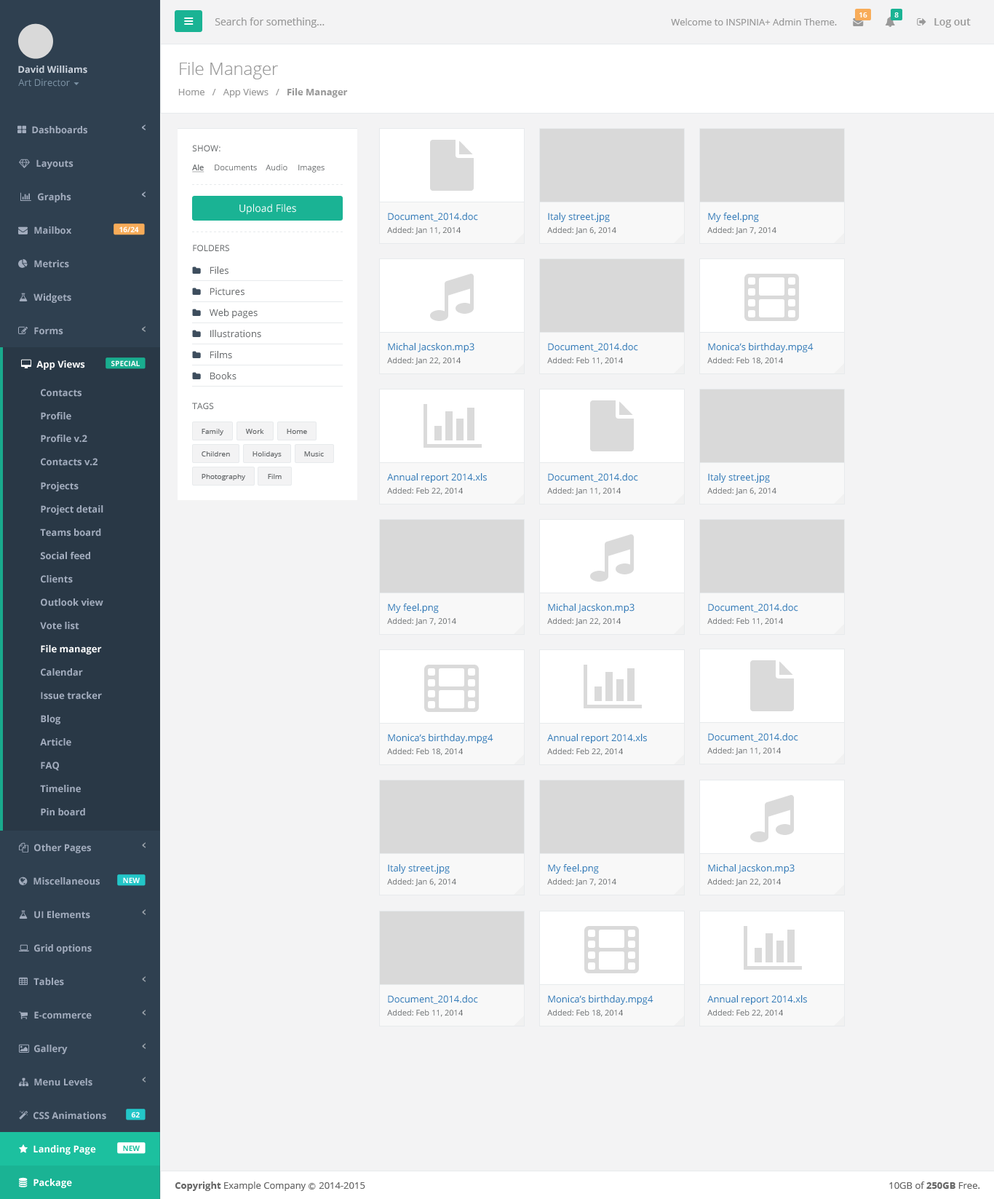
<style>
.page{position:relative;width:994px;height:1199px;background:#f3f3f4}
.page>*{position:absolute;margin:0}
.t1{font:10.2px "OpenSans";color:#999999}
.t2{font:7.3px "OpenSans-Semibold";color:#ffffff}
.t3{font:9.5px "OpenSans";color:#999999}
.t4{font:10.2px "OpenSans-Semibold";color:#999999}
.t5{font:9.5px "OpenSans-Bold";color:#cad1db}
.t6{font:17.5px "OpenSans-Light";color:#999999}
.t7{font:9.5px "OpenSans";color:#7d93a5}
.t8{font:9.5px "OpenSans-Bold";color:#999999}
.t9{font:9.5px "OpenSans-Bold";color:#a2acbd}
.t10{font:8.7px "OpenSans";color:#676a6c}
.t11{font:8px "OpenSans";color:#676a6c;text-decoration:underline}
.t12{font:8px "OpenSans";color:#676a6c}
.t13{font:10.2px "OpenSans";color:#ffffff}
.t14{font:9.5px "OpenSans";color:#337ab7}
.t15{font:7.3px "OpenSans-Bold";color:#fefefe}
.t16{font:9.5px "OpenSans";color:#676a6c}
.t17{font:9.5px "OpenSans-Bold";color:#ffffff}
.t18{font:7.3px "OpenSans";color:#676a6c}
.t19{font:7.3px "OpenSans-Bold";color:#1cc09f}
.t20{font:9.5px "OpenSans";color:#666666}
.t21{font:9.5px "OpenSans-Bold";color:#666666}
.t22{font:7.3px "Meiryo";color:#666666}
</style>
<div class="page">
<p class="t1" style="left:215px;top:17px;width:110px;height:11px">Search for something...</p>
<p class="t2" style="left:860px;top:12px;width:8px;height:5px">16</p>
<p class="t2" style="left:895px;top:12px;width:4px;height:5px">8</p>
<p class="t3" style="left:671px;top:18px;width:166px;height:7px">Welcome to INSPINIA+ Admin Theme.</p>
<p class="t4" style="left:935px;top:18px;width:36px;height:10px">Log out</p>
<p class="t5" style="left:18px;top:66px;width:69px;height:8px">David Williams</p>
<p class="t6" style="left:180px;top:62px;width:98px;height:17px">File Manager</p>
<p class="t7" style="left:18px;top:79px;width:52px;height:8px">Art Director</p>
<p class="t3" style="left:178px;top:88px;width:170px;height:10px">Home   /   App Views   /  <span class="t8"> File Manager</span></p>
<p class="t9" style="left:32px;top:126px;width:55px;height:8px">Dashboards</p>
<p class="t10" style="left:192px;top:145px;width:29px;height:6px">SHOW:</p>
<p class="t9" style="left:36px;top:159px;width:38px;height:10px">Layouts</p>
<p class="t11" style="left:192px;top:165px;width:13px;height:8px">Ale</p>
<p class="t12" style="left:215px;top:165px;width:42px;height:5px">Documents</p>
<p class="t12" style="left:266px;top:164px;width:22px;height:6px">Audio</p>
<p class="t12" style="left:298px;top:165px;width:27px;height:8px">Images</p>
<p class="t9" style="left:38px;top:193px;width:33px;height:9px">Graphs</p>
<p class="t13" style="left:240px;top:204px;width:56px;height:11px">Upload Files</p>
<p class="t14" style="left:388px;top:213px;width:90px;height:8px">Document_2014.doc</p>
<p class="t14" style="left:548px;top:213px;width:62px;height:9px">Italy street.jpg</p>
<p class="t14" style="left:708px;top:213px;width:51px;height:9px">My feel.png</p>
<p class="t9" style="left:34px;top:226px;width:37px;height:8px">Mailbox</p>
<p class="t15" style="left:119px;top:226px;width:20px;height:6px">16/24</p>
<p class="t12" style="left:387px;top:226px;width:74px;height:8px">Added: Jan 11, 2014</p>
<p class="t12" style="left:547px;top:226px;width:70px;height:8px">Added: Jan 6, 2014</p>
<p class="t12" style="left:708px;top:226px;width:69px;height:8px">Added: Jan 7, 2014</p>
<p class="t10" style="left:193px;top:245px;width:36px;height:6px">FOLDERS</p>
<p class="t9" style="left:34px;top:260px;width:35px;height:8px">Metrics</p>
<p class="t16" style="left:210px;top:266px;width:19px;height:8px">Files</p>
<p class="t9" style="left:33px;top:293px;width:38px;height:10px">Widgets</p>
<p class="t16" style="left:210px;top:288px;width:35px;height:8px">Pictures</p>
<p class="t16" style="left:210px;top:309px;width:48px;height:9px">Web pages</p>
<p class="t9" style="left:34px;top:327px;width:29px;height:8px">Forms</p>
<p class="t16" style="left:210px;top:330px;width:51px;height:8px">Illustrations</p>
<p class="t16" style="left:210px;top:351px;width:22px;height:8px">Films</p>
<p class="t14" style="left:388px;top:343px;width:87px;height:9px">Michal Jacskon.mp3</p>
<p class="t14" style="left:548px;top:343px;width:90px;height:9px">Document_2014.doc</p>
<p class="t14" style="left:708px;top:343px;width:106px;height:9px">Monica’s birthday.mpg4</p>
<p class="t17" style="left:36px;top:360px;width:49px;height:10px">App Views</p>
<p class="t15" style="left:111px;top:360px;width:29px;height:6px">SPECIAL</p>
<p class="t12" style="left:387px;top:357px;width:74px;height:8px">Added: Jan 22, 2014</p>
<p class="t12" style="left:547px;top:357px;width:76px;height:8px">Added: Feb 11, 2014</p>
<p class="t12" style="left:708px;top:357px;width:75px;height:8px">Added: Feb 18, 2014</p>
<p class="t16" style="left:210px;top:372px;width:27px;height:8px">Books</p>
<p class="t9" style="left:41px;top:389px;width:41px;height:8px">Contacts</p>
<p class="t9" style="left:41px;top:412px;width:30px;height:8px">Profile</p>
<p class="t10" style="left:192px;top:403px;width:22px;height:6px">TAGS</p>
<p class="t9" style="left:41px;top:435px;width:46px;height:8px">Profile v.2</p>
<p class="t18" style="left:202px;top:429px;width:22px;height:6px">Family</p>
<p class="t18" style="left:245px;top:429px;width:19px;height:5px">Work</p>
<p class="t18" style="left:287px;top:429px;width:20px;height:5px">Home</p>
<p class="t9" style="left:41px;top:458px;width:57px;height:8px">Contacts v.2</p>
<p class="t18" style="left:202px;top:451px;width:28px;height:5px">Children</p>
<p class="t18" style="left:253px;top:451px;width:29px;height:7px">Holidays</p>
<p class="t18" style="left:304px;top:451px;width:20px;height:5px">Music</p>
<p class="t18" style="left:202px;top:474px;width:43px;height:6px">Photography</p>
<p class="t18" style="left:268px;top:474px;width:14px;height:5px">Film</p>
<p class="t14" style="left:387px;top:473px;width:100px;height:10px">Annual report 2014.xls</p>
<p class="t14" style="left:548px;top:473px;width:90px;height:9px">Document_2014.doc</p>
<p class="t14" style="left:708px;top:473px;width:62px;height:10px">Italy street.jpg</p>
<p class="t9" style="left:41px;top:482px;width:38px;height:9px">Projects</p>
<p class="t12" style="left:387px;top:487px;width:76px;height:8px">Added: Feb 22, 2014</p>
<p class="t12" style="left:547px;top:487px;width:74px;height:8px">Added: Jan 11, 2014</p>
<p class="t12" style="left:708px;top:487px;width:69px;height:8px">Added: Jan 6, 2014</p>
<p class="t9" style="left:41px;top:505px;width:62px;height:10px">Project detail</p>
<p class="t9" style="left:40px;top:529px;width:61px;height:8px">Teams board</p>
<p class="t9" style="left:40px;top:552px;width:50px;height:8px">Social feed</p>
<p class="t9" style="left:41px;top:575px;width:32px;height:8px">Clients</p>
<p class="t9" style="left:41px;top:598px;width:62px;height:8px">Outlook view</p>
<p class="t14" style="left:388px;top:604px;width:51px;height:9px">My feel.png</p>
<p class="t14" style="left:548px;top:604px;width:87px;height:9px">Michal Jacskon.mp3</p>
<p class="t14" style="left:708px;top:604px;width:91px;height:8px">Document_2014.doc</p>
<p class="t12" style="left:387px;top:617px;width:69px;height:8px">Added: Jan 7, 2014</p>
<p class="t12" style="left:547px;top:617px;width:74px;height:8px">Added: Jan 22, 2014</p>
<p class="t12" style="left:708px;top:617px;width:75px;height:8px">Added: Feb 11, 2014</p>
<p class="t9" style="left:40px;top:622px;width:39px;height:8px">Vote list</p>
<p class="t17" style="left:41px;top:645px;width:61px;height:9px">File manager</p>
<p class="t9" style="left:41px;top:668px;width:42px;height:8px">Calendar</p>
<p class="t9" style="left:41px;top:692px;width:61px;height:8px">Issue tracker</p>
<p class="t9" style="left:41px;top:715px;width:19px;height:9px">Blog</p>
<p class="t14" style="left:388px;top:734px;width:106px;height:9px">Monica’s birthday.mpg4</p>
<p class="t14" style="left:547px;top:734px;width:100px;height:9px">Annual report 2014.xls</p>
<p class="t14" style="left:708px;top:733px;width:91px;height:9px">Document_2014.doc</p>
<p class="t9" style="left:40px;top:738px;width:31px;height:8px">Article</p>
<p class="t12" style="left:387px;top:748px;width:76px;height:8px">Added: Feb 18, 2014</p>
<p class="t12" style="left:547px;top:748px;width:76px;height:8px">Added: Feb 22, 2014</p>
<p class="t12" style="left:708px;top:747px;width:73px;height:8px">Added: Jan 11, 2014</p>
<p class="t9" style="left:41px;top:762px;width:18px;height:9px">FAQ</p>
<p class="t9" style="left:40px;top:785px;width:41px;height:8px">Timeline</p>
<p class="t9" style="left:41px;top:808px;width:44px;height:8px">Pin board</p>
<p class="t9" style="left:34px;top:844px;width:57px;height:9px">Other Pages</p>
<p class="t14" style="left:388px;top:864px;width:62px;height:10px">Italy street.jpg</p>
<p class="t14" style="left:548px;top:864px;width:51px;height:10px">My feel.png</p>
<p class="t14" style="left:708px;top:864px;width:87px;height:10px">Michal Jacskon.mp3</p>
<p class="t9" style="left:33px;top:877px;width:67px;height:8px">Miscellaneous</p>
<p class="t15" style="left:123px;top:877px;width:17px;height:6px">NEW</p>
<p class="t12" style="left:387px;top:878px;width:69px;height:8px">Added: Jan 6, 2014</p>
<p class="t12" style="left:547px;top:878px;width:70px;height:8px">Added: Jan 7, 2014</p>
<p class="t12" style="left:708px;top:878px;width:73px;height:8px">Added: Jan 22, 2014</p>
<p class="t9" style="left:34px;top:911px;width:56px;height:8px">UI Elements</p>
<p class="t9" style="left:34px;top:944px;width:58px;height:10px">Grid options</p>
<p class="t9" style="left:33px;top:978px;width:31px;height:8px">Tables</p>
<p class="t14" style="left:388px;top:995px;width:90px;height:9px">Document_2014.doc</p>
<p class="t14" style="left:548px;top:995px;width:106px;height:10px">Monica’s birthday.mpg4</p>
<p class="t14" style="left:708px;top:995px;width:99px;height:10px">Annual report 2014.xls</p>
<p class="t9" style="left:34px;top:1011px;width:58px;height:8px">E-commerce</p>
<p class="t12" style="left:387px;top:1009px;width:76px;height:8px">Added: Feb 11, 2014</p>
<p class="t12" style="left:547px;top:1009px;width:76px;height:8px">Added: Feb 18, 2014</p>
<p class="t12" style="left:708px;top:1009px;width:75px;height:8px">Added: Feb 22, 2014</p>
<p class="t9" style="left:34px;top:1045px;width:34px;height:9px">Gallery</p>
<p class="t9" style="left:34px;top:1078px;width:58px;height:8px">Menu Levels</p>
<p class="t9" style="left:33px;top:1112px;width:73px;height:8px">CSS Animations</p>
<p class="t15" style="left:131px;top:1112px;width:9px;height:6px">62</p>
<p class="t17" style="left:33px;top:1145px;width:63px;height:10px">Landing Page</p>
<p class="t19" style="left:123px;top:1145px;width:17px;height:6px">NEW</p>
<p class="t17" style="left:33px;top:1179px;width:39px;height:9px">Package</p>
<p class="t20" style="left:175px;top:1182px;width:190px;height:9px"><span class="t21">Copyright</span> Example Company <span class="t22">Ⓒ </span>2014-2015</p>
<p class="t20" style="left:890px;top:1182px;width:91px;height:7px">10GB of <span class="t21">250GB</span> Free.</p>
</div>
